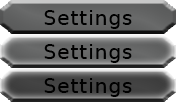
<style>
.page{position:relative;width:176px;height:102px}
.page>*{position:absolute;margin:0}
.t1{font:20px "BitstreamVeraSans-Roman";letter-spacing:0.05em;color:#000000}
</style>
<div class="page">
<p class="t1" style="left:44px;top:10px;width:88px;height:19px">Settings</p>
<p class="t1" style="left:44px;top:44px;width:88px;height:19px">Settings</p>
<p class="t1" style="left:44px;top:78px;width:88px;height:19px">Settings</p>
</div>
